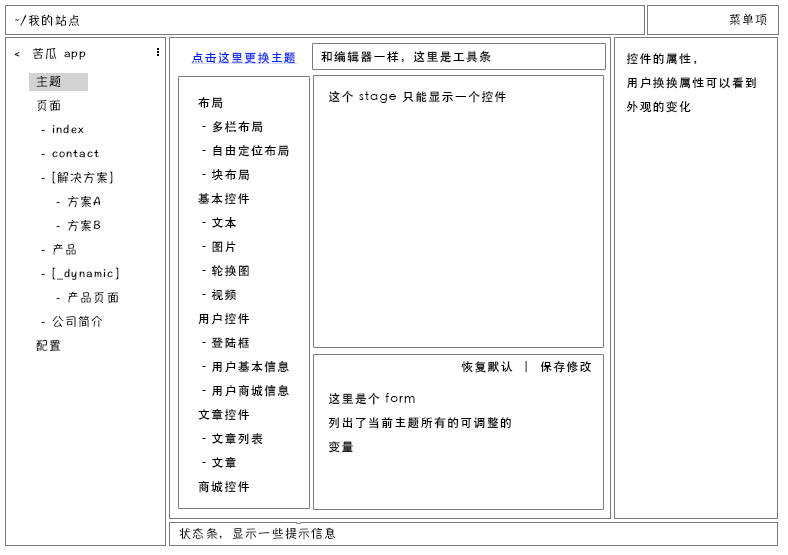
<style>
.page{position:relative;width:788px;height:555px;background:#ffffff}
.page>*{position:absolute;margin:0}
.t1{font:12px "HannotateSC-W5";letter-spacing:0.1em;color:#000000}
.t2{font:12px "STHeiti";letter-spacing:0.1em;color:#001df9;text-decoration:underline}
.t3{font:12px "STHeiti";letter-spacing:0.1em;color:#000000}
.t4{font:12px/24px "STHeiti";letter-spacing:0.1em;color:#000000}
.t5{font:12px/24px "HannotateSC-W5";letter-spacing:0.1em;color:#000000}
</style>
<div class="page">
<p class="t1" style="left:15px;top:14px;width:65px;height:13px">~/我的站点</p>
<p class="t1" style="left:729px;top:13px;width:38px;height:13px">菜单项</p>
<p class="t1" style="left:14px;top:47px;width:72px;height:13px">&lt;  苦瓜 app</p>
<p class="t2" style="left:191px;top:52px;width:107px;height:12px">点击这里更换主题</p>
<p class="t3" style="left:321px;top:50px;width:170px;height:13px">和编辑器一样，这里是工具条</p>
<p class="t4" style="left:626px;top:53px;width:130px;height:60px">控件的属性，<br>用户换换属性可以看到<br>外观的变化</p>
<p class="t5" style="left:36px;top:75px;width:83px;height:276px">主题<br>页面<br> - index<br> - contact<br> - [解决方案]<br>    - 方案A<br>    - 方案B<br> - 产品<br> - [_dynamic]<br>    - 产品页面<br> - 公司简介<br>配置</p>
<p class="t4" style="left:198px;top:97px;width:91px;height:396px">布局<br> - 多栏布局<br> - 自由定位布局<br> - 块布局<br>基本控件<br> - 文本<br> - 图片<br> - 轮换图<br> - 视频<br>用户控件<br> - 登陆框<br> - 用户基本信息<br> - 用户商城信息<br>文章控件<br> - 文章列表<br> - 文章<br>商城控件</p>
<p class="t3" style="left:329px;top:90px;width:177px;height:13px">这个 stage 只能显示一个控件</p>
<p class="t3" style="left:461px;top:360px;width:130px;height:13px">恢复默认  |  保存修改</p>
<p class="t4" style="left:328px;top:392px;width:183px;height:61px">这里是个 form<br>列出了当前主题所有的可调整的<br>变量</p>
<p class="t1" style="left:179px;top:527px;width:156px;height:13px">状态条，显示一些提示信息</p>
</div>
